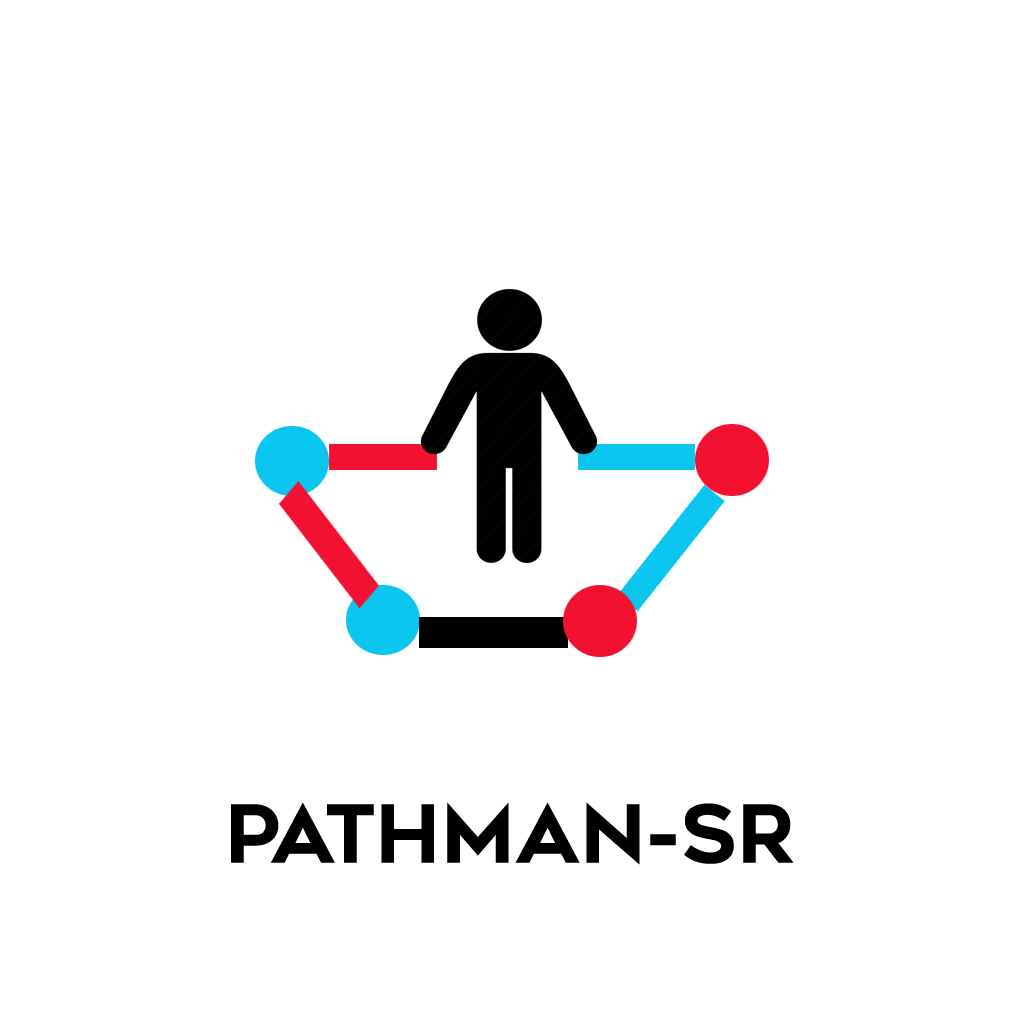
<style>
.page{position:relative;width:1024px;height:1024px;background:#ffffff}
.page>*{position:absolute;margin:0}
.t1{font:80px "Renogare-Regular";color:#000000}
</style>
<div class="page">
<p class="t1" style="left:231px;top:802px;width:563px;height:63px">PATHMAN-SR</p>
</div>
